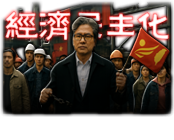
<style>
.page{position:relative;width:174px;height:140px;background:#ffffff}
.page>*{position:absolute;margin:0}
.t1{font:36.4px "FZZJ-MSHLFW";letter-spacing:-0.1em}
</style>
<div class="page">
<p class="t1" style="left:5px;top:10px;width:164px;height:31px">经济民主化</p>
</div>
